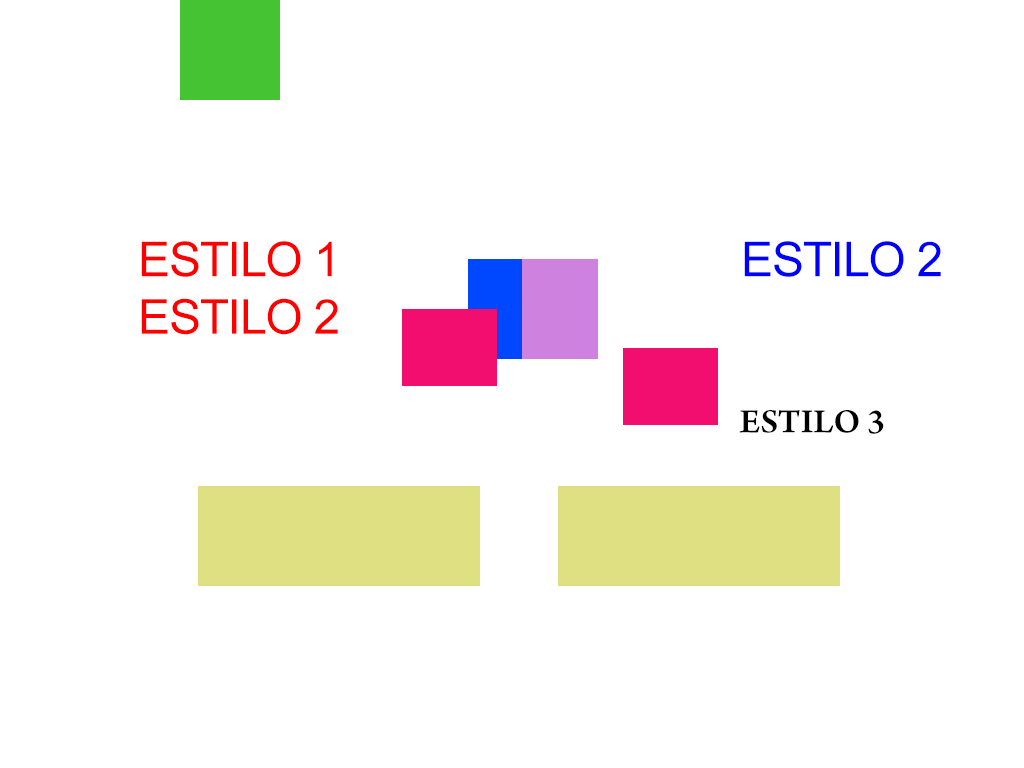
<style>
.page{position:relative;width:1024px;height:768px;background:#ffffff}
.page>*{position:absolute;margin:0}
.t1{font:48px "ArialMT";letter-spacing:-0.025em;color:#ff0000}
.t2{font:48px "ArialMT";letter-spacing:-0.025em;color:#0000ff}
.t3{font:36px "ArnoPro-Smbd";color:#000000}
</style>
<div class="page">
<p class="t1" style="left:141px;top:241px;width:197px;height:94px;text-align:center">ESTILO 1<br>ESTILO 2</p>
<p class="t2" style="left:744px;top:241px;width:197px;height:36px">ESTILO 2</p>
<p class="t3" style="left:739px;top:410px;width:145px;height:24px">ESTILO 3</p>
</div>
